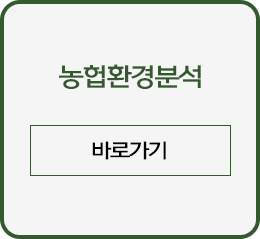
<style>
.page{position:relative;width:260px;height:239px;background:#f5f5f5}
.page>*{position:absolute;margin:0}
.t1{font:25px "ONEMobileBold";letter-spacing:-0.05em;color:#34592e;scale:1.1 1}
.t2{font:20px "ONEMobileBold";letter-spacing:-0.05em;color:#000000;scale:1.1 1}
</style>
<div class="page">
<p class="t1" style="left:59px;top:64px;width:142px;height:25px">농헙환경분석</p>
<p class="t2" style="left:92px;top:141px;width:74px;height:19px">바로가기</p>
</div>
